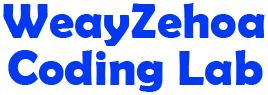
<style>
.page{position:relative;width:268px;height:95px;background:#ffffff}
.page>*{position:absolute;margin:0}
.t1{font:50px "BerlinSansFBDemi-Bold";color:#043aef}
</style>
<div class="page">
<p class="t1" style="left:3px;top:3px;width:262px;height:43px">WeayZehoa</p>
<p class="t1" style="left:8px;top:50px;width:255px;height:42px">Coding Lab</p>
</div>
